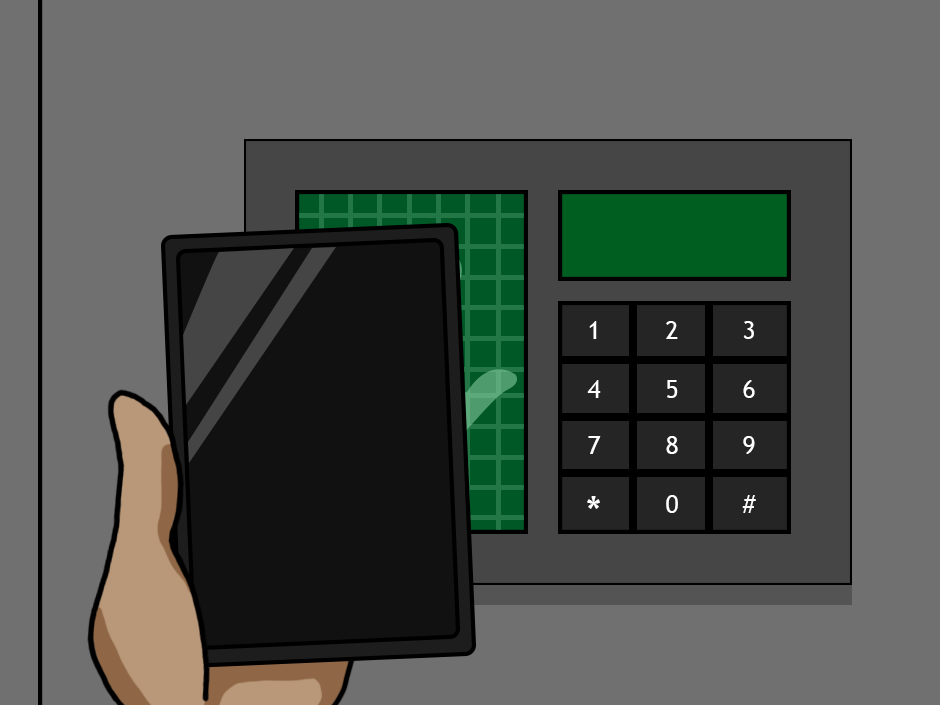
<style>
.page{position:relative;width:940px;height:705px;background:#707070}
.page>*{position:absolute;margin:0}
.t1{font:25px "TrebuchetMS";color:#ffffff}
.t2{font:41.7px "TrebuchetMS";color:#ffffff}
</style>
<div class="page">
<p class="t1" style="left:589px;top:321px;width:8px;height:18px">1</p>
<p class="t1" style="left:666px;top:321px;width:12px;height:18px">2</p>
<p class="t1" style="left:743px;top:321px;width:11px;height:18px">3</p>
<p class="t1" style="left:587px;top:380px;width:14px;height:18px">4</p>
<p class="t1" style="left:667px;top:380px;width:11px;height:18px">5</p>
<p class="t1" style="left:743px;top:380px;width:12px;height:18px">6</p>
<p class="t1" style="left:588px;top:436px;width:13px;height:18px">7</p>
<p class="t1" style="left:666px;top:436px;width:12px;height:18px">8</p>
<p class="t1" style="left:743px;top:436px;width:12px;height:18px">9</p>
<p class="t2" style="left:587px;top:496px;width:13px;height:13px">*</p>
<p class="t1" style="left:666px;top:495px;width:12px;height:18px">0</p>
<p class="t1" style="left:742px;top:495px;width:14px;height:18px">#</p>
</div>
